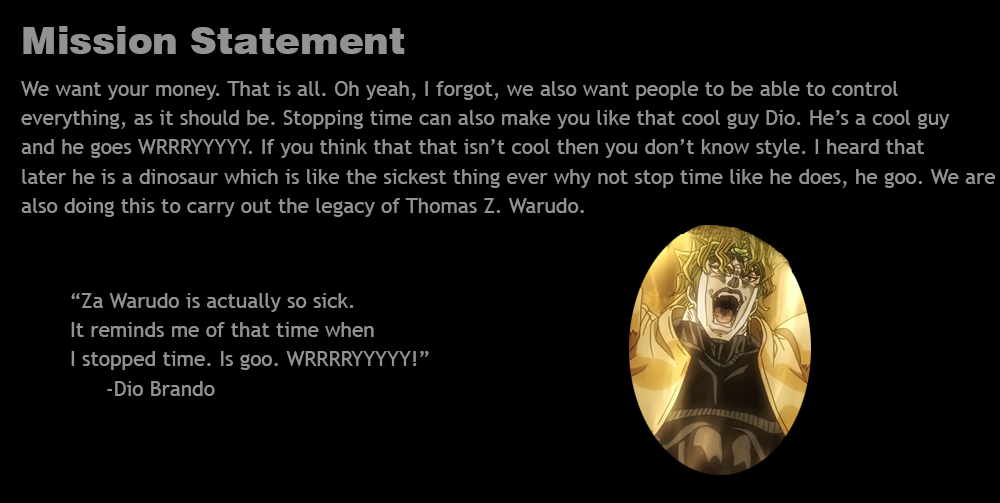
<style>
.page{position:relative;width:1000px;height:503px;background:#000000}
.page>*{position:absolute;margin:0}
.t1{font:37.5px "Swiss721BT-Black";color:#909293}
.t2{font:20.8px/29.2px "TrebuchetMS";color:#909293}
</style>
<div class="page">
<p class="t1" style="left:23px;top:26px;width:382px;height:28px">Mission Statement</p>
<p class="t2" style="left:21px;top:81px;width:975px;height:136px">We want your money. That is all. Oh yeah, I forgot, we also want people to be able to control <br>everything, as it should be. Stopping time can also make you like that cool guy Dio. He’s a cool guy<br>and he goes WRRRYYYYY. If you think that that isn’t cool then you don’t know style. I heard that<br>later he is a dinosaur which is like the sickest thing ever why not stop time like he does, he goo. We are<br>also doing this to carry out the legacy of Thomas Z. Warudo.</p>
<p class="t2" style="left:71px;top:293px;width:358px;height:103px">“Za Warudo is actually so sick. <br>It reminds me of that time when<br>I stopped time. Is goo. WRRRRYYYYY!”<br> -Dio Brando</p>
</div>
